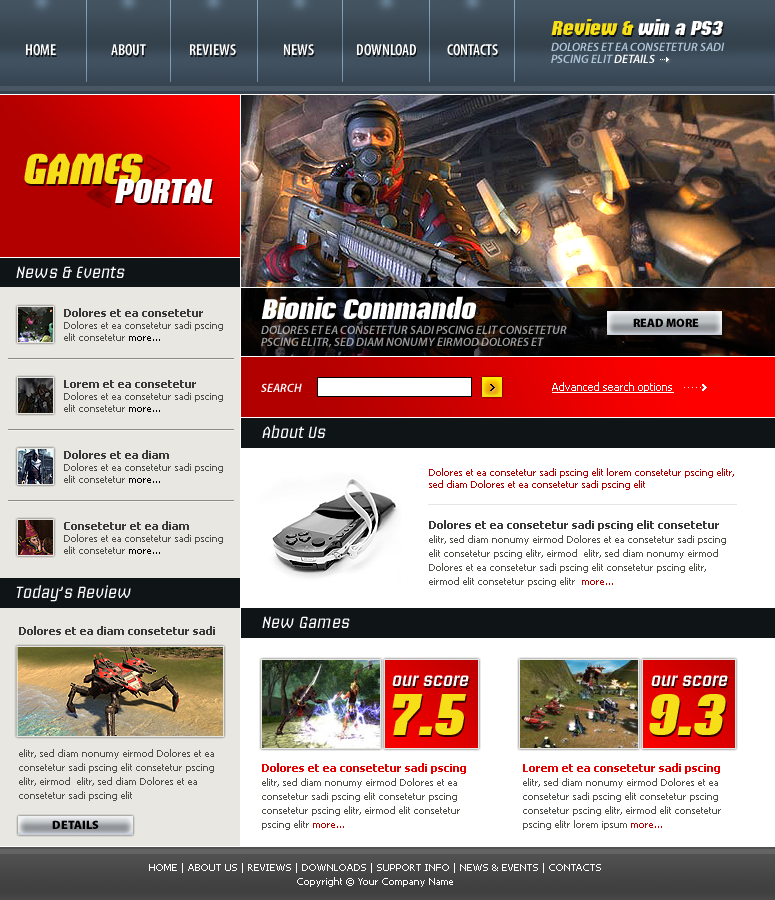
<style>
.page{position:relative;width:775px;height:900px;background:#ffffff}
.page>*{position:absolute;margin:0}
.t1{font:20px "BriemAkademiStd-Black";color:#ffffff;font-style:italic}
.t2{font:20px "BriemAkademiStd-Black";color:#f6df18;font-style:italic}
.t3{font:16px "MyriadPro-SemiboldCond";color:#ffffff}
.t4{font:12px/12px "MyriadPro-SemiboldIt";color:#afc5d9;text-transform:uppercase}
.t5{font:12px/12px "MyriadPro-SemiboldIt";color:#ffffff;text-transform:uppercase}
.t6{font:43px "BriemAkademiStd-Black";color:#f6df18;font-style:italic}
.t7{font:34px "BriemAkademiStd-Black";color:#ffffff;font-style:italic}
.t8{font:16px "BriemAkademiStd-Regular";color:#ffffff;font-style:italic}
.t9{font:28px "BriemAkademiStd-Black";color:#ffffff;font-style:italic}
.t10{font:10px/12px "Tahoma";color:#4f514b}
.t11{font:11px/12px "Tahoma-Bold";color:#3a3a3a}
.t12{font:10px/12px "Tahoma";color:#000000}
.t13{font:12px "MyriadPro-Black";color:#000000;text-transform:uppercase}
.t14{font:12px/12px "MyriadPro-SemiboldIt";color:#9b9a9a;text-transform:uppercase}
.t15{font:12px "MyriadPro-SemiboldIt";color:#ffffff;text-transform:uppercase}
.t16{font:11px "Tahoma";color:#ffffff;text-decoration:underline}
.t17{font:10px/12px "Tahoma";color:#b20000}
.t18{font:10px/14px "Tahoma";color:#4f514b}
.t19{font:11px/14px "Tahoma-Bold";color:#3a3a3a}
.t20{font:10px/14px "Tahoma";color:#b20000}
.t21{font:11px "Tahoma-Bold";color:#3a3a3a}
.t22{font:18px/49.1px "BriemAkademiStd-Semibold";color:#ffffff;font-style:italic}
.t23{font:58px/49.1px "BriemAkademiStd-Black";color:#f6df18;font-style:italic}
.t24{font:11px/14px "Tahoma-Bold";color:#e70000}
.t25{font:10px/14px "Tahoma";color:#ffffff}
</style>
<div class="page">
<p class="t1" style="left:551px;top:19px;width:172px;height:16px"><span class="t2">Review &amp; </span>win a PS3</p>
<p class="t3" style="left:26px;top:44px;width:30px;height:12px">HOME</p>
<p class="t3" style="left:111px;top:44px;width:35px;height:12px">ABOUT</p>
<p class="t3" style="left:190px;top:44px;width:46px;height:11px">REVIEWS</p>
<p class="t3" style="left:284px;top:44px;width:30px;height:11px">NEWS</p>
<p class="t3" style="left:357px;top:44px;width:59px;height:12px">DOWNLOAD</p>
<p class="t3" style="left:447px;top:44px;width:51px;height:12px">CONTACTS</p>
<p class="t4" style="left:551px;top:42px;width:174px;height:21px">Dolores et ea consetetur sadi pscing elit <span class="t5">DETAILS</span></p>
<p class="t6" style="left:24px;top:153px;width:119px;height:31px">GAMES</p>
<p class="t7" style="left:115px;top:179px;width:98px;height:24px">PORTAL</p>
<p class="t8" style="left:16px;top:266px;width:109px;height:12px">News &amp; Events</p>
<p class="t9" style="left:261px;top:296px;width:216px;height:23px">Bionic Commando</p>
<p class="t10" style="left:64px;top:308px;width:159px;height:33px"><span class="t11">Dolores et ea consetetur </span>Dolores et ea consetetur sadi pscing elit consetetur<span class="t12"> more...</span></p>
<p class="t13" style="left:633px;top:318px;width:66px;height:9px">READ MORE</p>
<p class="t14" style="left:261px;top:325px;width:306px;height:23px">Dolores et ea consetetur sadi pscing elit consetetur <br>pscing elitr, sed diam nonumy eirmod Dolores et</p>
<p class="t10" style="left:64px;top:380px;width:159px;height:32px"><span class="t11">Lorem et ea consetetur </span>Dolores et ea consetetur sadi pscing elit consetetur<span class="t12"> more...</span></p>
<p class="t15" style="left:261px;top:383px;width:41px;height:9px">SEARCH</p>
<p class="t16" style="left:552px;top:382px;width:122px;height:11px">Advanced search options</p>
<p class="t8" style="left:262px;top:425px;width:64px;height:13px">About Us</p>
<p class="t10" style="left:64px;top:450px;width:159px;height:33px"><span class="t11">Dolores et ea diam <br></span>Dolores et ea consetetur sadi pscing elit consetetur<span class="t12"> more...</span></p>
<p class="t17" style="left:429px;top:468px;width:305px;height:22px">Dolores et ea consetetur sadi pscing elit lorem consetetur pscing elitr, sed diam Dolores et ea consetetur sadi pscing elit</p>
<p class="t10" style="left:64px;top:521px;width:159px;height:33px"><span class="t11">Consetetur et ea diam </span>Dolores et ea consetetur sadi pscing elit consetetur<span class="t12"> more...</span></p>
<p class="t18" style="left:429px;top:520px;width:297px;height:67px"><span class="t19">Dolores et ea consetetur sadi pscing elit consetetur </span>elitr, sed diam nonumy eirmod Dolores et ea consetetur sadi pscing elit consetetur pscing elitr, eirmod  elitr, sed diam nonumy eirmod Dolores et ea consetetur sadi pscing elit consetetur pscing elitr, eirmod elit consetetur pscing elitr  <span class="t20">more...</span></p>
<p class="t8" style="left:16px;top:585px;width:115px;height:17px">Today’s Review</p>
<p class="t8" style="left:262px;top:616px;width:88px;height:12px">New Games</p>
<p class="t21" style="left:19px;top:626px;width:196px;height:9px">Dolores et ea diam consetetur sadi</p>
<p class="t22" style="left:392px;top:675px;width:77px;height:60px">our score<br><span class="t23">7.5</span></p>
<p class="t22" style="left:649px;top:675px;width:79px;height:60px">our score<br><span class="t23">9.3</span></p>
<p class="t18" style="left:19px;top:749px;width:195px;height:52px">elitr, sed diam nonumy eirmod Dolores et ea consetetur sadi pscing elit consetetur pscing elitr, eirmod  elitr, sed diam Dolores et ea consetetur sadi pscing elit</p>
<p class="t18" style="left:262px;top:763px;width:204px;height:67px"><span class="t24">Dolores et ea consetetur sadi pscing </span>elitr, sed diam nonumy eirmod Dolores et ea consetetur sadi pscing elit consetetur pscing  consetetur pscing elitr, eirmod elit consetetur pscing elitr <span class="t20">more...</span></p>
<p class="t18" style="left:523px;top:763px;width:198px;height:67px"><span class="t24">Lorem et ea consetetur sadi pscing </span>elitr, sed diam nonumy eirmod Dolores et ea consetetur sadi pscing elit consetetur pscing  consetetur pscing elitr, eirmod elit consetetur pscing elitr lorem ipsum <span class="t20">more...</span></p>
<p class="t13" style="left:52px;top:820px;width:47px;height:9px">details</p>
<p class="t25" style="left:149px;top:863px;width:452px;height:24px;text-align:center">HOME | ABOUT US | REVIEWS | DOWNLOADS | SUPPORT INFO | NEWS &amp; EVENTS | CONTACTS<br>Copyright © Your Company Name</p>
</div>
